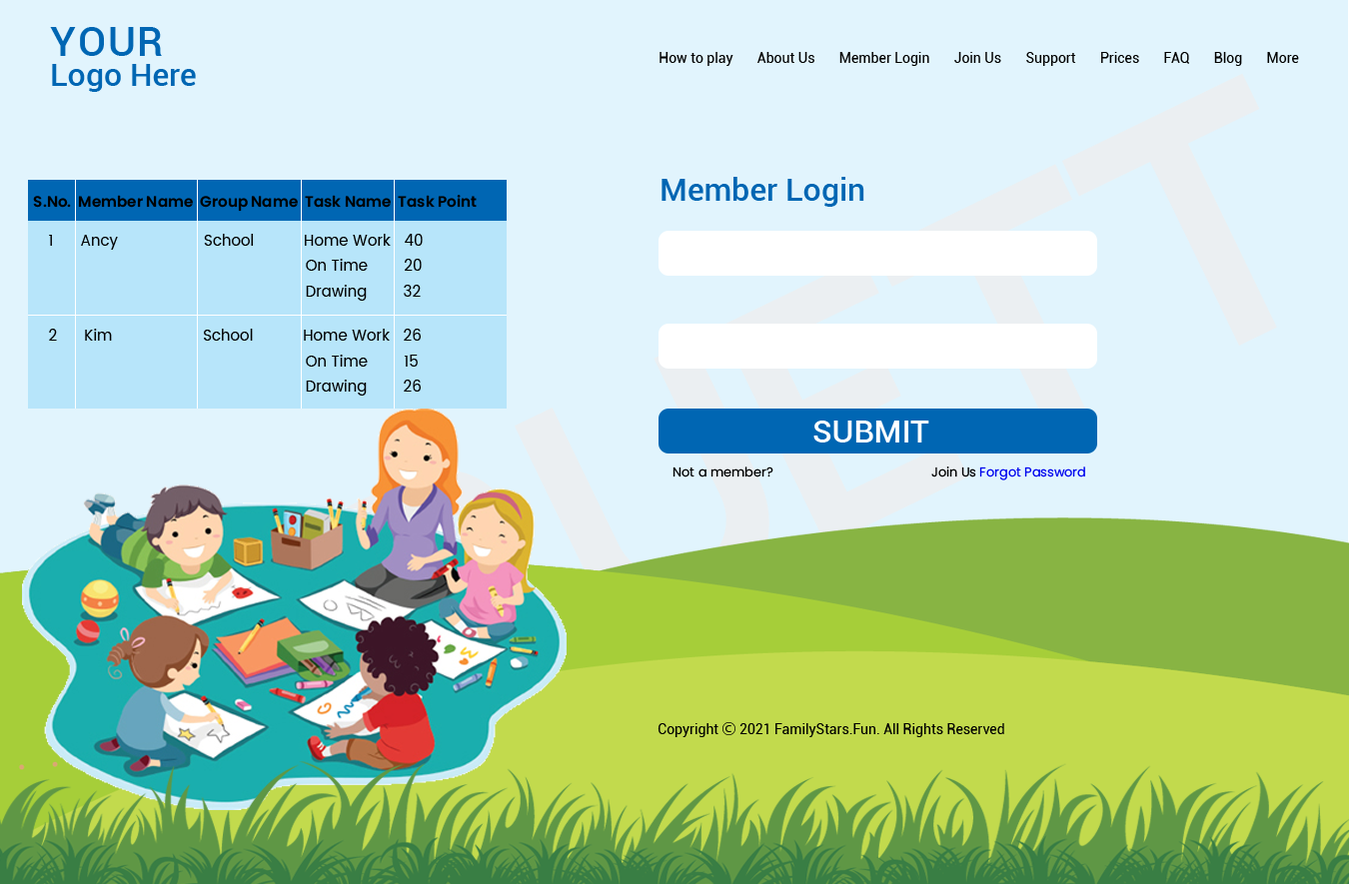
<style>
.page{position:relative;width:1349px;height:884px;background:#e1f4fd}
.page>*{position:absolute;margin:0}
.t1{font:31.8px/30px "Roboto-Medium";color:#0066b3}
.t2{font:40.8px/30px "Roboto-Medium";letter-spacing:0.05em;color:#0066b3}
.t3{font:14px "Roboto-Regular";color:#000000}
.t4{font:31.8px "Roboto-Medium";color:#0066b3}
.t5{font:15.1px "Poppins-SemiBold";color:#000000}
.t6{font:15.1px "Poppins-Regular";color:#000000}
.t7{font:31.8px "Roboto-Medium";color:#ffffff}
.t8{font:12.9px "Poppins-Regular";color:#000000}
.t9{font:12.9px "Poppins-Regular";color:#0005ee}
.t10{font:14px "KozGoPr6N-Regular";color:#000000}
</style>
<div class="page">
<p class="t1" style="left:50px;top:27px;width:146px;height:65px"><span class="t2">YOUR <br></span>Logo Here</p>
<p class="t3" style="left:659px;top:52px;width:640px;height:14px">How to play       About Us       Member Login       Join Us       Support       Prices       FAQ       Blog       More</p>
<p class="t4" style="left:661px;top:177px;width:203px;height:30px">Member Login</p>
<p class="t5" style="left:33px;top:195px;width:444px;height:17px">S.No.  Member Name  Group Name  Task Name  Task Point</p>
<p class="t6" style="left:49px;top:234px;width:374px;height:16px">1      Ancy                   School           Home Work   40</p>
<p class="t6" style="left:306px;top:259px;width:116px;height:12px">On Time        20</p>
<p class="t6" style="left:306px;top:285px;width:115px;height:16px">Drawing        32</p>
<p class="t6" style="left:49px;top:329px;width:372px;height:12px">2      Kim                    School           Home Work   26</p>
<p class="t6" style="left:306px;top:355px;width:112px;height:12px">On Time        15</p>
<p class="t6" style="left:306px;top:380px;width:115px;height:16px">Drawing        26</p>
<p class="t7" style="left:813px;top:421px;width:116px;height:22px">SUBMIT</p>
<p class="t8" style="left:672px;top:467px;width:413px;height:14px">Not a member?                                              Join Us<span class="t9"> Forgot Password</span></p>
<p class="t3" style="left:657px;top:722px;width:347px;height:15px">Copyright <span class="t10">Ⓒ</span> 2021 FamilyStars.Fun. All Rights Reserved</p>
</div>
